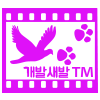
<style>
.page{position:relative;width:100px;height:100px;background:#ffffff}
.page>*{position:absolute;margin:0}
.t1{font:14px "BMJUA";color:#df11f8}
</style>
<div class="page">
<p class="t1" style="left:23px;top:66px;width:47px;height:12px">개발새발</p>
</div>
